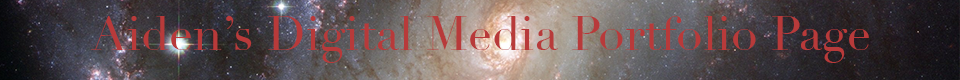
<style>
.page{position:relative;width:960px;height:80px}
.page>*{position:absolute;margin:0}
.t1{font:48px "Didot";color:#b83a3a}
</style>
<div class="page">
<p class="t1" style="left:91px;top:16px;width:778px;height:47px">Aiden’s Digital Media Portfolio Page</p>
</div>
